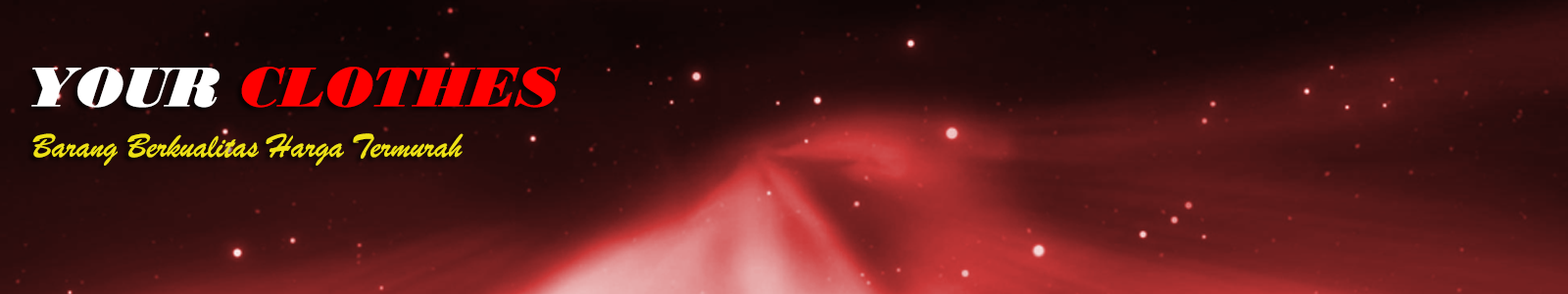
<style>
.page{position:relative;width:1568px;height:294px}
.page>*{position:absolute;margin:0}
.t1{font:58.8px "BodoniMTBlack-Italic";color:#ff0000}
.t2{font:58.8px "BodoniMTBlack-Italic";color:#ffffff}
.t3{font:35.3px "BrushScriptMT";color:#eee115}
</style>
<div class="page">
<p class="t1" style="left:31px;top:67px;width:530px;height:41px"><span class="t2">YOUR </span>CLOTHES</p>
<p class="t3" style="left:32px;top:133px;width:432px;height:33px">Barang Berkualitas Harga Termurah</p>
</div>
